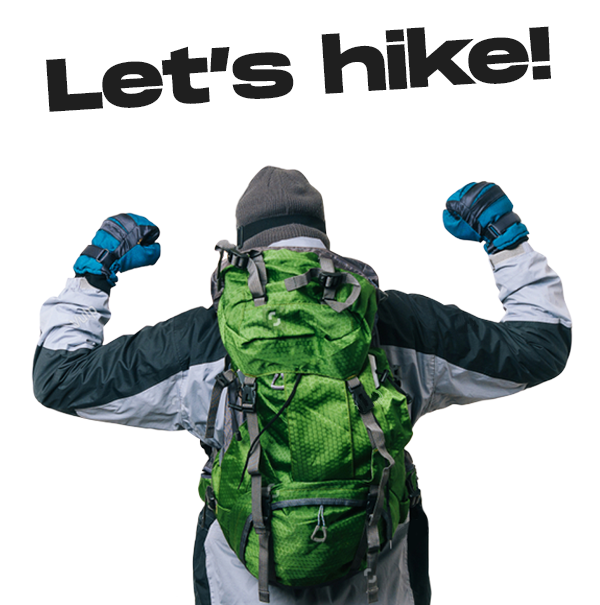
<style>
.page{position:relative;width:600px;height:605px;background:#ffffff}
.page>*{position:absolute;margin:0}
.t1{font:74.5px "MonumentExtended-Ultrabold";color:#1f1f1f}
</style>
<div class="page">
<p class="t1" style="left:46px;top:26px;width:505px;height:86px;rotate:-4deg">Let’s hike!</p>
</div>
